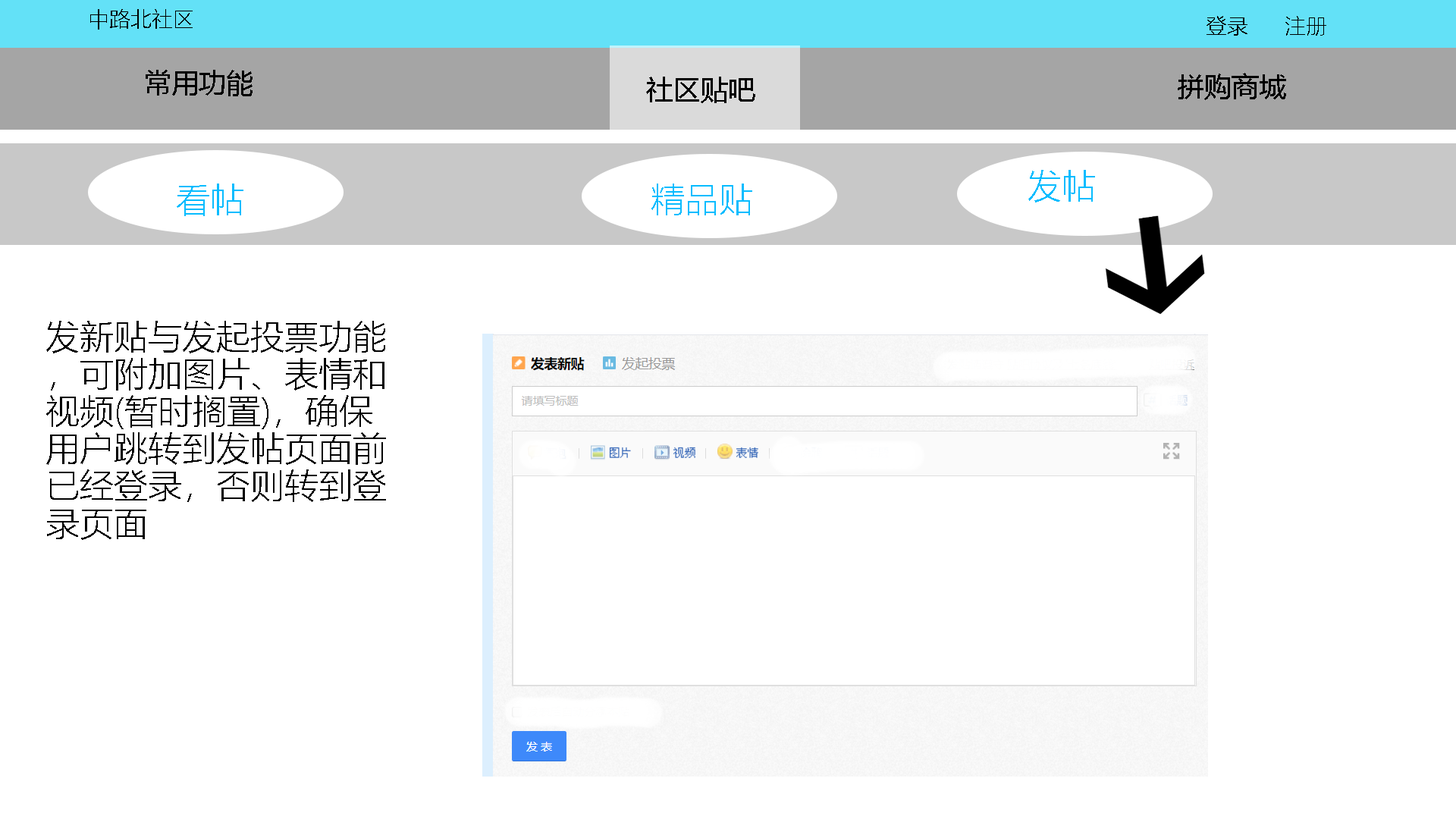
<style>
.page{position:relative;width:1456px;height:819px;background:#ffffff}
.page>*{position:absolute;margin:0}
.t1{font:21.2px "MicrosoftYaHeiLight";color:#000000}
.t2{font:27.3px "MicrosoftYaHei";color:#000000}
.t3{font:34.1px "MicrosoftYaHeiLight";color:#07bcff}
.t4{font:34.1px/37.2px "MicrosoftYaHeiLight";color:#000000}
</style>
<div class="page">
<p class="t1" style="left:90px;top:9px;width:103px;height:21px">中路北社区</p>
<p class="t1" style="left:1206px;top:16px;width:120px;height:20px">登录      注册</p>
<p class="t2" style="left:146px;top:70px;width:107px;height:26px">常用功能</p>
<p class="t2" style="left:646px;top:77px;width:109px;height:26px">社区贴吧</p>
<p class="t2" style="left:1178px;top:73px;width:108px;height:27px">拼购商城</p>
<p class="t3" style="left:1028px;top:170px;width:67px;height:32px">发帖</p>
<p class="t3" style="left:177px;top:184px;width:66px;height:32px">看帖</p>
<p class="t3" style="left:651px;top:184px;width:101px;height:31px">精品贴</p>
<p class="t4" style="left:46px;top:321px;width:340px;height:219px">发新贴与发起投票功能，可附加图片、表情和视频(暂时搁置)，确保用户跳转到发帖页面前已经登录，否则转到登录页面</p>
</div>
